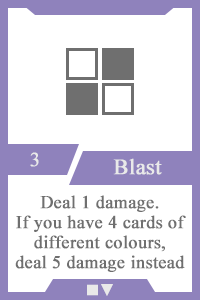
<style>
.page{position:relative;width:200px;height:300px;background:#ffffff}
.page>*{position:absolute;margin:0}
.t1{font:20px "TimesNewRomanPSMT";color:#e9e9e9;font-weight:bold}
.t2{font:22px "TimesNewRomanPSMT";color:#e9e9e9;font-weight:bold}
.t3{font:18px/20px "TimesNewRomanPSMT";color:#6f6f6f;font-weight:bold}
.t4{font:14px "AdobeHeitiStd-Regular";color:#e9e9e9;font-weight:bold}
</style>
<div class="page">
<p class="t1" style="left:30px;top:152px;width:9px;height:15px">3</p>
<p class="t2" style="left:113px;top:158px;width:49px;height:17px">Blast</p>
<p class="t3" style="left:15px;top:195px;width:171px;height:77px;text-align:center">Deal 1 damage.<br>If you have 4 cards of different colours,<br>deal 5 damage instead</p>
<p class="t4" style="left:87px;top:284px;width:26px;height:12px">■▼</p>
</div>
